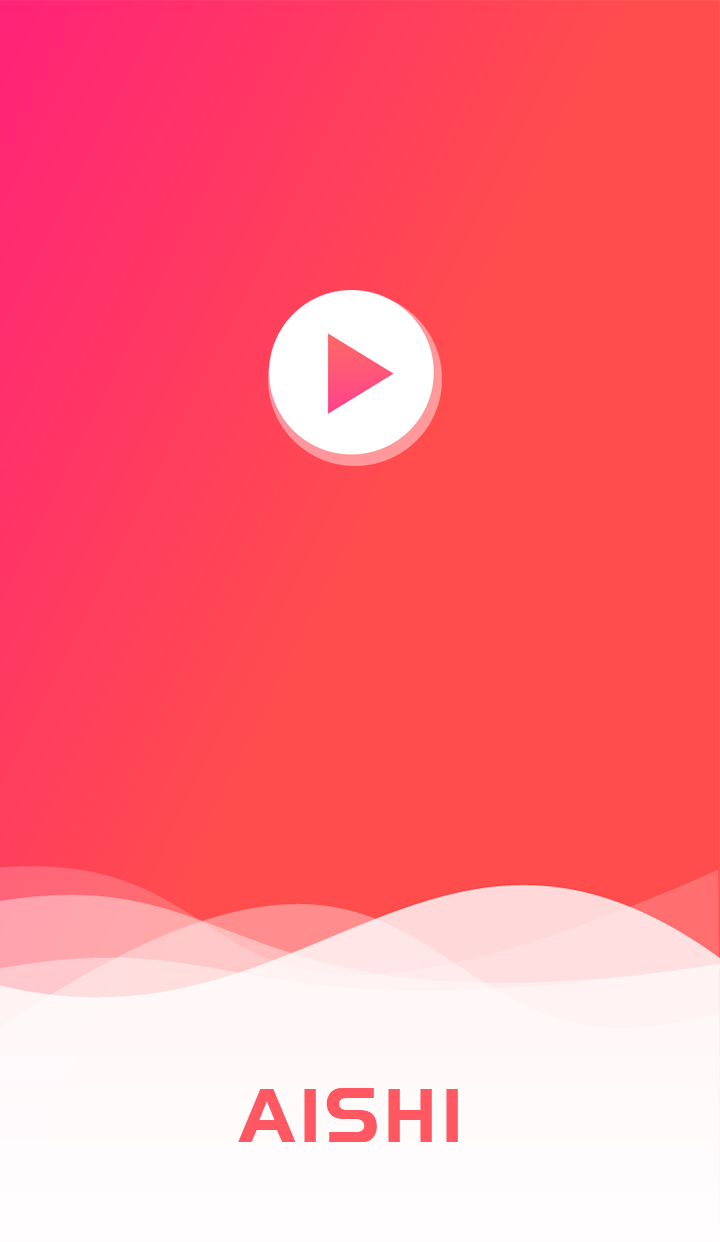
<style>
.page{position:relative;width:720px;height:1242px;background:#ff4d4d}
.page>*{position:absolute;margin:0}
.t1{font:80px "PangMenZhengDao";letter-spacing:0.04em;color:#ff5862}
</style>
<div class="page">
<p class="t1" style="left:238px;top:1088px;width:220px;height:54px">AISHI</p>
</div>
